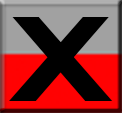
<style>
.page{position:relative;width:122px;height:113px;background:#000000}
.page>*{position:absolute;margin:0}
.t1{font:117.4px "Arial-BoldMT";color:#000000;scale:1.32 1}
</style>
<div class="page">
<p class="t1" style="left:8px;top:17px;width:105px;height:84px">X</p>
</div>
